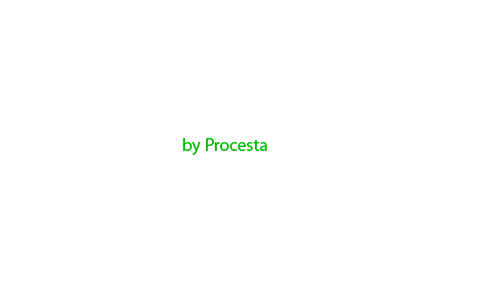
<style>
.page{position:relative;width:500px;height:300px;background:#ffffff}
.page>*{position:absolute;margin:0}
.t1{font:18px "MyriadPro-Regular";color:#00bf00}
</style>
<div class="page">
<p class="t1" style="left:183px;top:138px;width:84px;height:18px">by Procesta</p>
</div>
